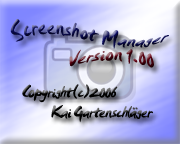
<style>
.page{position:relative;width:180px;height:144px}
.page>*{position:absolute;margin:0}
.t1{font:21.6px "SmudgerLetPlain"}
.t2{font:17.3px "SmudgerLetPlain";letter-spacing:-0.05em}
</style>
<div class="page">
<p class="t1" style="left:10px;top:19px;width:159px;height:30px">Screenshot Manager</p>
<p class="t1" style="left:69px;top:49px;width:85px;height:19px">Version 1.00</p>
<p class="t2" style="left:22px;top:84px;width:96px;height:19px">Copyright(c)2006</p>
<p class="t2" style="left:51px;top:105px;width:102px;height:18px">Kai Gartenschläger</p>
</div>
